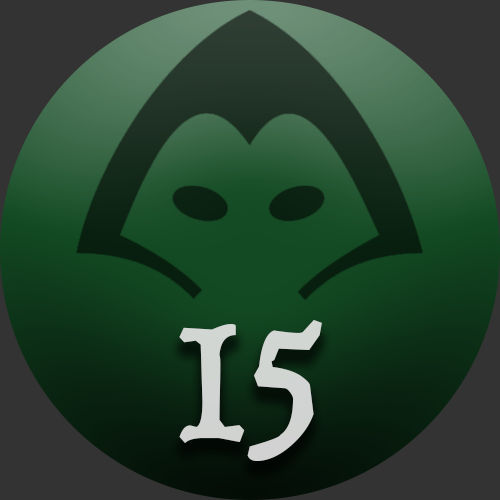
<style>
.page{position:relative;width:500px;height:500px;background:#333333}
.page>*{position:absolute;margin:0}
.t1{font:200px "Hultog";color:#d1d4d2}
</style>
<div class="page">
<p class="t1" style="left:179px;top:320px;width:143px;height:141px">15</p>
</div>
